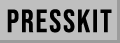
<style>
.page{position:relative;width:120px;height:43px;background:#bfbfbf}
.page>*{position:absolute;margin:0}
.t1{font:32px "BebasNeue-Regular";letter-spacing:0.06em;color:#000000}
</style>
<div class="page">
<p class="t1" style="left:7px;top:9px;width:105px;height:24px">PRESSKIT</p>
</div>
